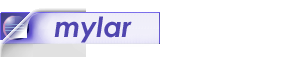
<style>
.page{position:relative;width:283px;height:57px;background:#ffffff}
.page>*{position:absolute;margin:0}
.t1{font:28px "CenturyGothic-BoldItalic";color:#5046af}
</style>
<div class="page">
<p class="t1" style="left:54px;top:16px;width:78px;height:27px">mylar</p>
</div>
